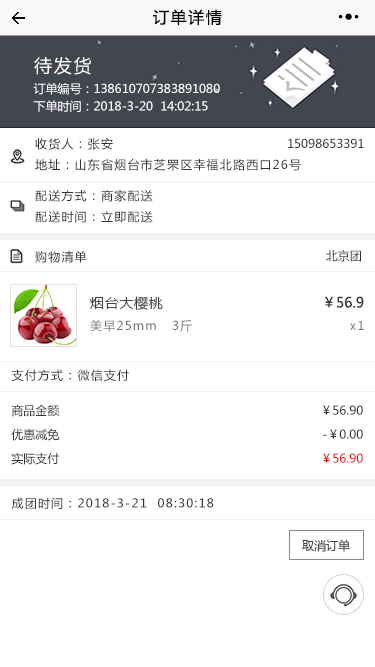
<style>
.page{position:relative;width:375px;height:667px;background:#ffffff}
.page>*{position:absolute;margin:0}
.t1{font:16px "MicrosoftYaHei";letter-spacing:0.1em;color:#020202}
.t2{font:18px "MicrosoftYaHei";letter-spacing:0.1em;color:#ffffff}
.t3{font:12px "MicrosoftYaHei";color:#fffefe}
.t4{font:12px "MicrosoftYaHei";color:#ffffff}
.t5{font:12px "MicrosoftYaHei";letter-spacing:0.1em;color:#333333}
.t6{font:12px "MicrosoftYaHei";color:#333333}
.t7{font:14px "MicrosoftYaHei";letter-spacing:0.05em;color:#454545}
.t8{font:14px "MicrosoftYaHei";color:#363636}
.t9{font:12px "MicrosoftYaHei";letter-spacing:0.1em;color:#747474}
.t10{font:12px/24px "MicrosoftYaHei";color:#333333}
.t11{font:12px/24px "MicrosoftYaHei";color:#e40b0b}
.t12{font:12px "MicrosoftYaHei";letter-spacing:0.001em;color:#454545}
</style>
<div class="page">
<p class="t1" style="left:153px;top:9px;width:69px;height:17px">订单详情</p>
<p class="t2" style="left:34px;top:57px;width:57px;height:18px">待发货</p>
<p class="t3" style="left:33px;top:82px;width:187px;height:13px">订单编号：138610707383891080</p>
<p class="t4" style="left:33px;top:100px;width:175px;height:12px">下单时间：2018-3-20  14:02:15</p>
<p class="t5" style="left:35px;top:138px;width:78px;height:12px">收货人：张安</p>
<p class="t6" style="left:288px;top:138px;width:76px;height:10px">15098653391</p>
<p class="t5" style="left:35px;top:158px;width:266px;height:13px">地址：山东省烟台市芝罘区幸福北路西口26号</p>
<p class="t5" style="left:35px;top:189px;width:118px;height:13px">配送方式：商家配送</p>
<p class="t5" style="left:35px;top:211px;width:118px;height:12px">配送时间：立即配送</p>
<p class="t5" style="left:35px;top:250px;width:52px;height:13px">购物清单</p>
<p class="t6" style="left:326px;top:250px;width:35px;height:12px">北京团</p>
<p class="t7" style="left:90px;top:296px;width:73px;height:14px">烟台大樱桃</p>
<p class="t8" style="left:325px;top:296px;width:39px;height:12px">￥56.9</p>
<p class="t9" style="left:90px;top:320px;width:102px;height:12px">美早25mm   3斤</p>
<p class="t9" style="left:350px;top:320px;width:14px;height:10px">x1</p>
<p class="t5" style="left:11px;top:369px;width:118px;height:13px">支付方式：微信支付</p>
<p class="t10" style="left:11px;top:404px;width:49px;height:61px">商品金额 <br>优惠减免<br>实际支付</p>
<p class="t10" style="left:323px;top:405px;width:40px;height:58px;text-align:right">￥56.90<br>-￥0.00<br><span class="t11">￥56.90</span></p>
<p class="t5" style="left:11px;top:497px;width:203px;height:12px">成团时间：2018-3-21  08:30:18</p>
<p class="t12" style="left:302px;top:539px;width:49px;height:13px">取消订单</p>
</div>
